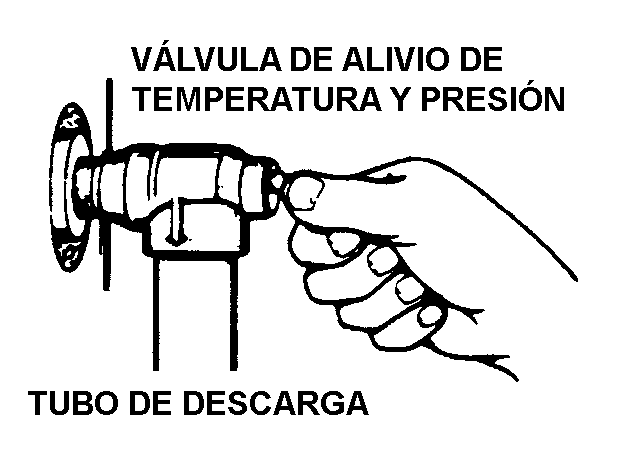
<style>
.page{position:relative;width:626px;height:451px;background:#ffffff}
.page>*{position:absolute;margin:0}
.t1{font:33.3px "Arial-BoldMT";color:#000000}
</style>
<div class="page">
<p class="t1" style="left:131px;top:40px;width:433px;height:71px">VÁLVULA DE ALIVIO DE TEMPERATURA Y PRESIÓN</p>
<p class="t1" style="left:28px;top:391px;width:341px;height:24px">TUBO DE DESCARGA</p>
</div>
